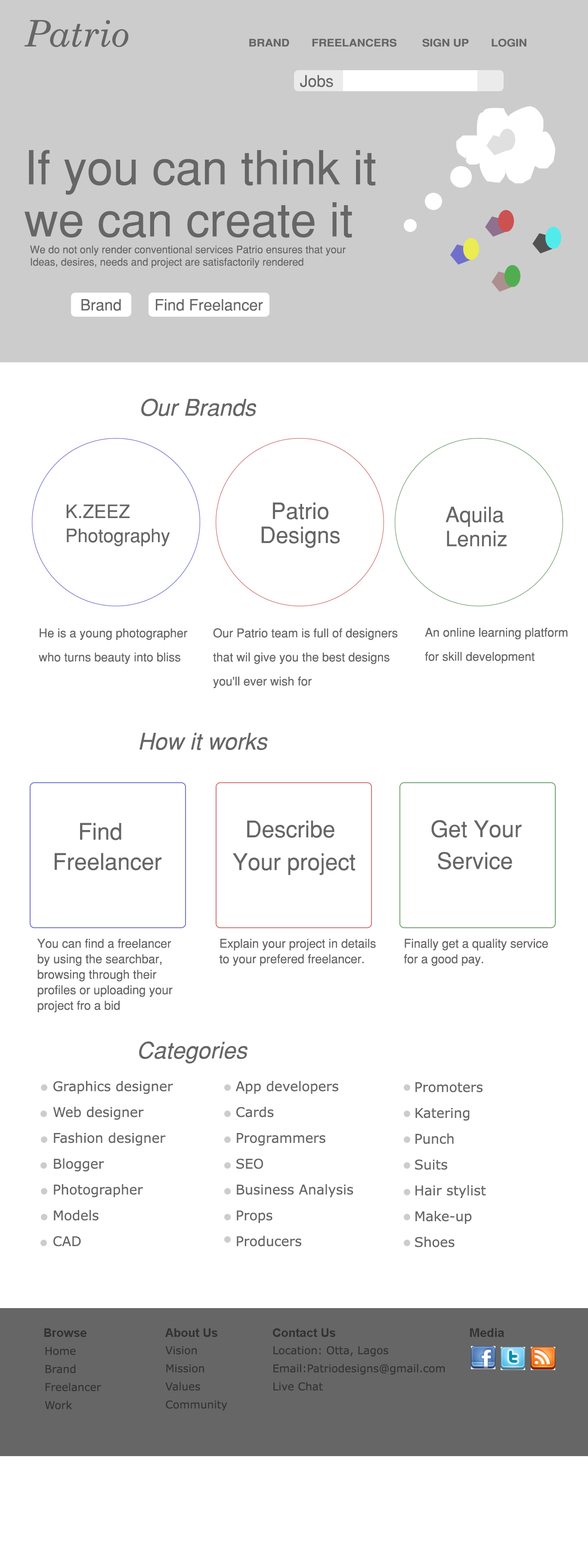
<style>
.page{position:relative;width:588px;height:1568px;background:#ffffff}
.page>*{position:absolute;margin:0}
.t1{font:36.6px "CenturySchoolbook-Italic";color:#666666}
.t2{font:10.3px "SansSerifBold";color:#666666;text-transform:uppercase;scale:1.1 1}
.t3{font:10.3px "SansSerifBold";color:#666666;scale:1.1 1}
.t4{font:15.9px "SansSerif";color:#666666}
.t5{font:46.9px/52.1px "SansSerif";color:#666666}
.t6{font:10.3px "SansSerif";color:#666666}
.t7{font:15.5px "SansSerif";color:#666666}
.t8{font:22.8px "SansSerifOblique";color:#666666}
.t9{font:18.5px/24.1px "SansSerif";color:#666666}
.t10{font:22.4px/24.1px "SansSerif";color:#666666}
.t11{font:21.1px/24.1px "SansSerif";color:#666666}
.t12{font:12px/24.1px "SansSerif";color:#666666}
.t13{font:22.8px/32.7px "SansSerif";color:#666666}
.t14{font:22.8px/31.8px "SansSerif";color:#666666}
.t15{font:22.8px/30.1px "SansSerif";color:#666666}
.t16{font:12px/15.5px "SansSerif";color:#666666}
.t17{font:13.3px/25.8px "MSReferenceSansSerif";color:#666666}
.t18{font:12px "Arial-BoldMT";color:#333333}
.t19{font:10.8px/18.1px "MSReferenceSansSerif";color:#333333}
</style>
<div class="page">
<p class="t1" style="left:24px;top:20px;width:105px;height:27px">Patrio</p>
<p class="t2" style="left:249px;top:39px;width:277px;height:8px"><span class="t3">BRAND       </span>Freelancers        sIGN UP       LOGIN</p>
<p class="t4" style="left:300px;top:75px;width:33px;height:12px">Jobs</p>
<p class="t5" style="left:25px;top:150px;width:350px;height:88px">If you can think it <br>we can create it</p>
<p class="t6" style="left:30px;top:245px;width:316px;height:23px">We do not only render conventional services Patrio ensures that your Ideas, desires, needs and project are satisfactorily rendered</p>
<p class="t7" style="left:81px;top:299px;width:40px;height:12px">Brand</p>
<p class="t7" style="left:156px;top:299px;width:107px;height:12px">Find Freelancer</p>
<p class="t8" style="left:141px;top:398px;width:115px;height:19px">Our Brands</p>
<p class="t9" style="left:66px;top:504px;width:104px;height:42px">K.ZEEZ<br>Photography</p>
<p class="t10" style="left:261px;top:502px;width:79px;height:46px;text-align:center">Patrio<br>Designs</p>
<p class="t11" style="left:445px;top:506px;width:61px;height:41px">Aquila<br>Lenniz</p>
<p class="t12" style="left:39px;top:628px;width:149px;height:36px">He is a young photographer who turns beauty into bliss</p>
<p class="t12" style="left:213px;top:628px;width:185px;height:60px">Our Patrio team is full of designers that wil give you the best designs you'll ever wish for</p>
<p class="t12" style="left:425px;top:627px;width:143px;height:37px">An online learning platform for skill development</p>
<p class="t8" style="left:139px;top:733px;width:129px;height:17px">How it works</p>
<p class="t13" style="left:232px;top:821px;width:123px;height:54px">Describe<br>Your project</p>
<p class="t14" style="left:431px;top:820px;width:91px;height:50px">Get Your<br> Service</p>
<p class="t15" style="left:55px;top:823px;width:107px;height:47px">Find  <br>Freelancer</p>
<p class="t16" style="left:37px;top:938px;width:136px;height:74px">You can find a freelancer by using the searchbar, browsing through their profiles or uploading your project fro a bid</p>
<p class="t16" style="left:219px;top:938px;width:157px;height:28px">Explain your project in details to your prefered freelancer.</p>
<p class="t16" style="left:404px;top:938px;width:144px;height:28px">Finally get a quality service for a good pay.</p>
<p class="t8" style="left:139px;top:1041px;width:108px;height:23px">Categories</p>
<p class="t17" style="left:53px;top:1081px;width:120px;height:166px">Graphics designer<br>Web designer<br>Fashion designer<br>Blogger<br>Photographer<br>Models<br>CAD</p>
<p class="t17" style="left:235px;top:1081px;width:118px;height:166px">App developers<br>Cards<br>Programmers<br>SEO<br>Business Analysis<br>Props<br>Producers</p>
<p class="t17" style="left:415px;top:1082px;width:71px;height:165px">Promoters<br>Katering<br>Punch<br>Suits<br>Hair stylist<br>Make-up<br>Shoes</p>
<p class="t18" style="left:44px;top:1328px;width:42px;height:9px">Browse</p>
<p class="t18" style="left:165px;top:1328px;width:52px;height:9px">About Us</p>
<p class="t18" style="left:273px;top:1328px;width:62px;height:9px">Contact Us</p>
<p class="t18" style="left:470px;top:1328px;width:34px;height:9px">Media</p>
<p class="t19" style="left:45px;top:1347px;width:56px;height:63px">Home<br>Brand<br>Freelancer<br>Work</p>
<p class="t19" style="left:165px;top:1346px;width:62px;height:65px">Vision<br>Mission<br>Values<br>Community</p>
<p class="t19" style="left:273px;top:1346px;width:172px;height:45px">Location: Otta, Lagos<br>Email:Patriodesigns@gmail.com<br>Live Chat</p>
</div>
